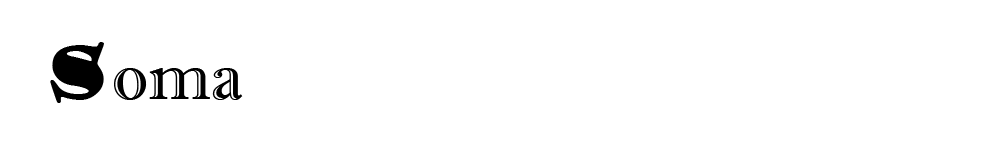
<style>
.page{position:relative;width:1000px;height:150px;background:#ffffff}
.page>*{position:absolute;margin:0}
.t1{font:72px "ImprintMT-Shadow";color:#000000}
.t2{font:72px "GoudyStout";color:#000000}
</style>
<div class="page">
<p class="t1" style="left:50px;top:42px;width:193px;height:61px"><span class="t2">s</span>oma</p>
</div>
